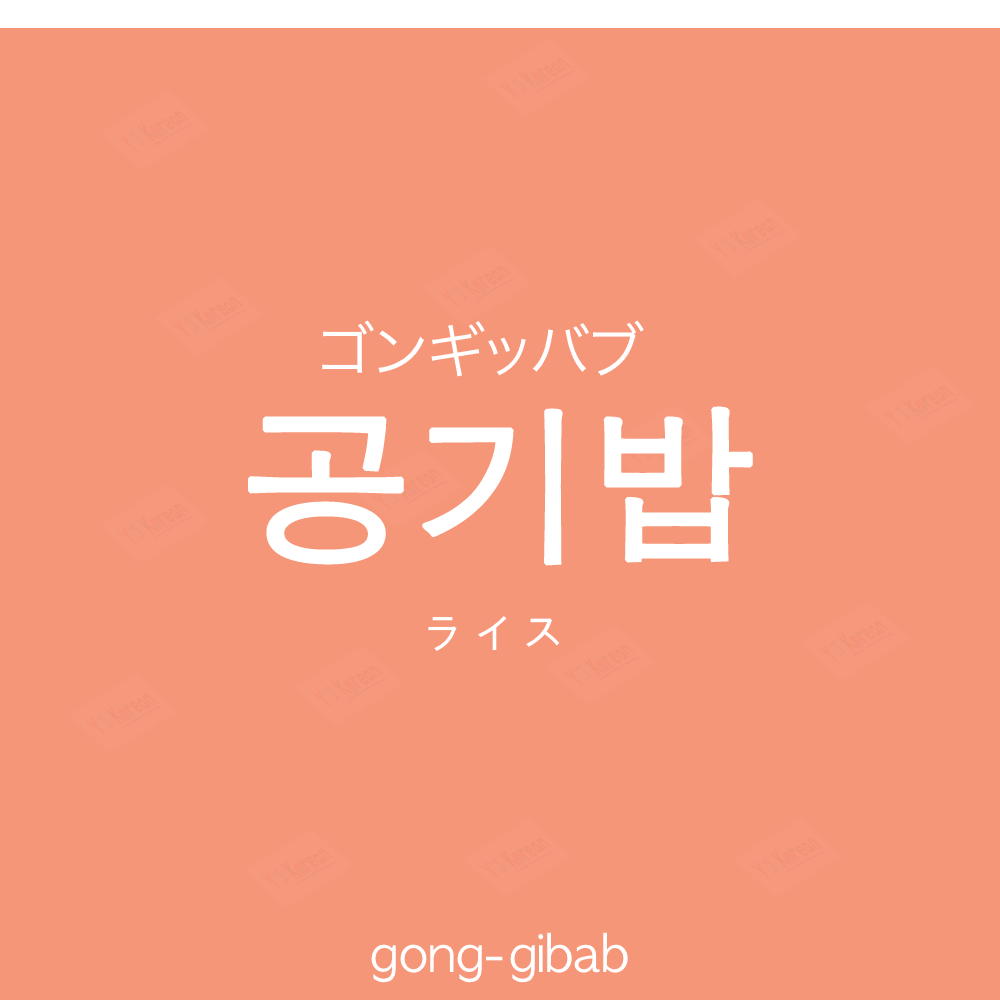
<style>
.page{position:relative;width:1000px;height:1000px;background:#f69679}
.page>*{position:absolute;margin:0}
.t1{font:60px "HiraKakuProN-W3";color:#ffffff;text-transform:uppercase}
.t2{font:170px "AppleGothic";color:#ffffff;font-weight:bold}
.t3{font:50px "AppleGothic";color:#ffffff}
</style>
<div class="page">
<p class="t1" style="left:322px;top:320px;width:322px;height:57px">ゴンギッバブ</p>
<p class="t2" style="left:248px;top:406px;width:505px;height:160px">공기밥</p>
<p class="t3" style="left:428px;top:616px;width:132px;height:35px">ライス</p>
<p class="t3" style="left:371px;top:932px;width:257px;height:51px">gong-gibab</p>
</div>
